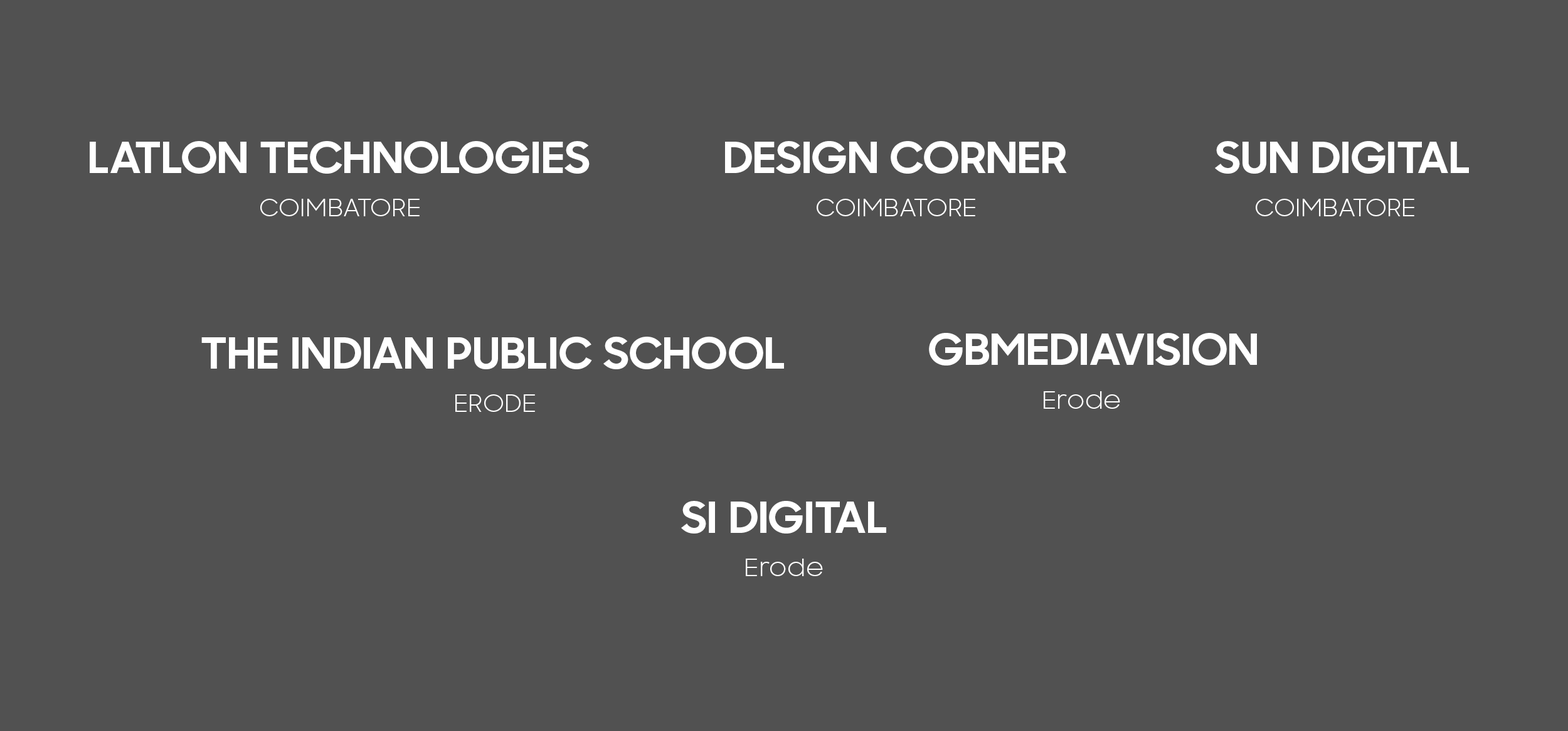
<style>
.page{position:relative;width:1568px;height:731px;background:#515151}
.page>*{position:absolute;margin:0}
.t1{font:43.4px "SamsungSharpSans-Bold";color:#ffffff;scale:1.05 1}
.t2{font:23.6px "SamsungSharpSans";color:#ffffff;scale:1.05 1}
.t3{font:23.6px "SamsungSharpSans";color:#ffffff;text-transform:uppercase;scale:1.05 1}
</style>
<div class="page">
<p class="t1" style="left:90px;top:141px;width:500px;height:33px">LATLON TECHNOLOGIES</p>
<p class="t1" style="left:725px;top:141px;width:342px;height:33px">DESIGN CORNER</p>
<p class="t1" style="left:1215px;top:141px;width:254px;height:33px">SUN DIGITAL</p>
<p class="t2" style="left:260px;top:199px;width:160px;height:17px">COIMBATORE</p>
<p class="t2" style="left:817px;top:199px;width:158px;height:17px">COIMBATORE</p>
<p class="t2" style="left:1256px;top:199px;width:158px;height:17px">COIMBATORE</p>
<p class="t1" style="left:201px;top:337px;width:583px;height:32px">THE INDIAN PUBLIC SCHOOL</p>
<p class="t1" style="left:929px;top:333px;width:328px;height:33px">GBMEDIAVISION</p>
<p class="t3" style="left:455px;top:395px;width:80px;height:17px">Erode</p>
<p class="t2" style="left:1044px;top:391px;width:76px;height:18px">Erode</p>
<p class="t1" style="left:681px;top:501px;width:205px;height:33px">SI DIGITAL</p>
<p class="t2" style="left:746px;top:559px;width:77px;height:17px">Erode</p>
</div>
